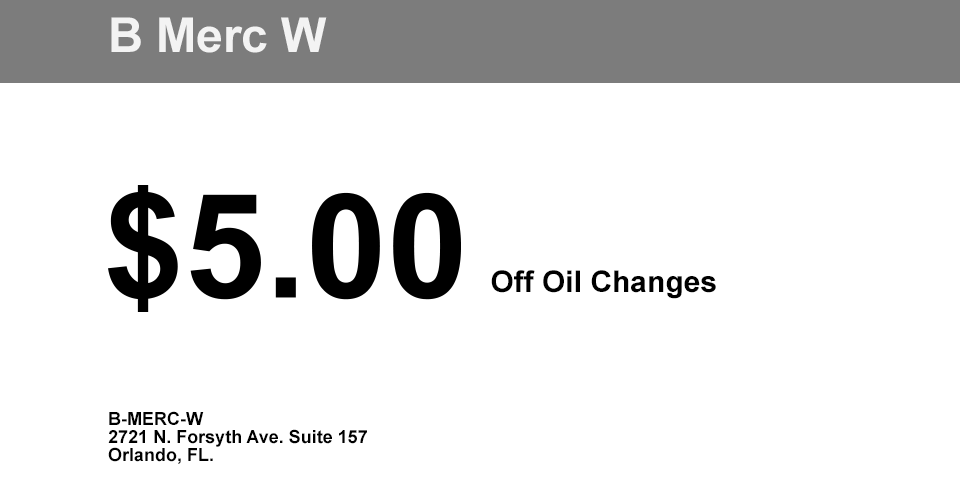
<style>
.page{position:relative;width:960px;height:479px;background:#ffffff}
.page>*{position:absolute;margin:0}
.t1{font:48px "Arial-BoldMT";color:#f3f3f3}
.t2{font:14px "ArialMT";color:#f3f3f3}
.t3{font:30px "Arial-BoldMT";color:#000000}
.t4{font:18px/18px "Arial-BoldMT";color:#000000}
</style>
<div class="page">
<p class="t1" style="left:111px;top:17px;width:216px;height:36px"><span class="t2"><br></span><br>   B Merc W</p>
<p class="t3" style="left:491px;top:270px;width:225px;height:29px">Off Oil Changes</p>
<p class="t4" style="left:108px;top:411px;width:259px;height:53px">B-MERC-W<br>2721 N. Forsyth Ave. Suite 157<br>Orlando, FL.</p>
</div>
